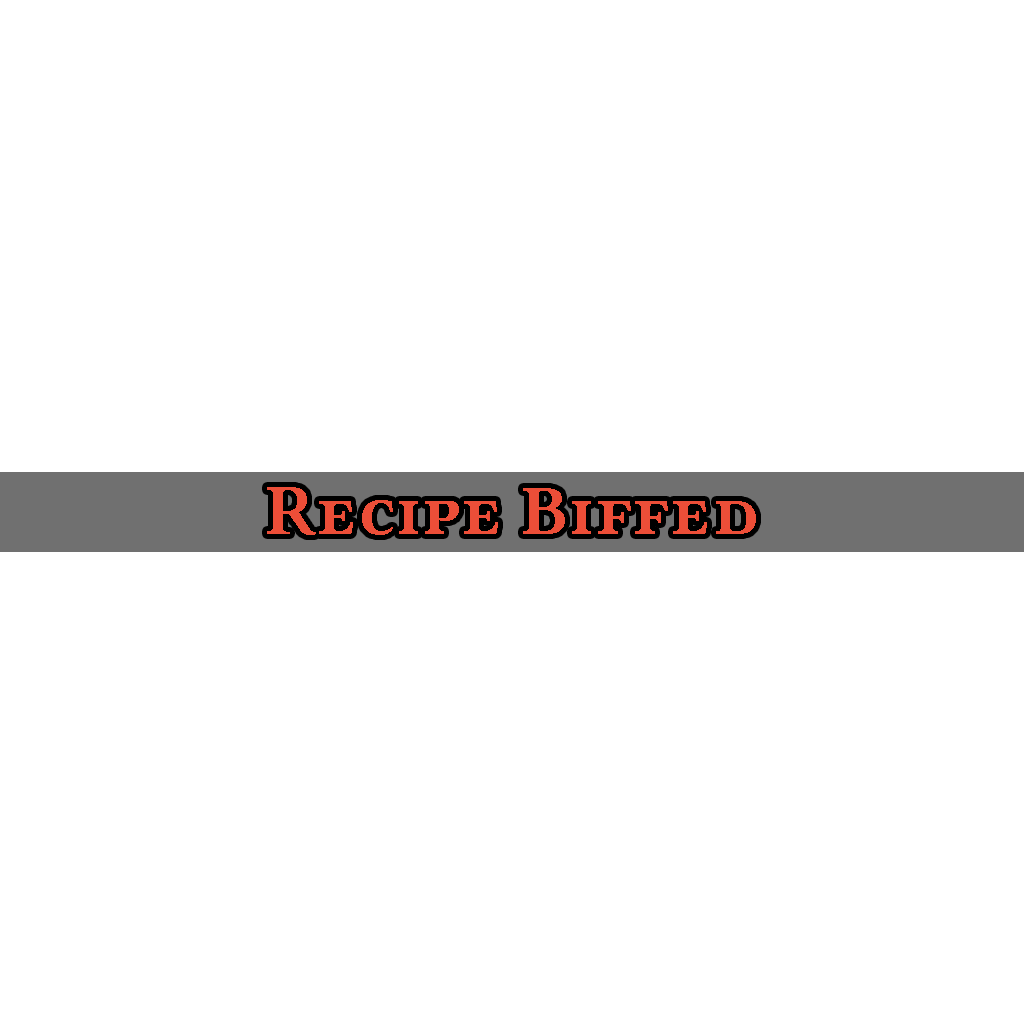
<style>
.page{position:relative;width:1024px;height:1024px;background:#ffffff}
.page>*{position:absolute;margin:0}
.t1{font:71.1px "LinLibertineB";color:#ec4e38;font-variant:small-caps}
</style>
<div class="page">
<p class="t1" style="left:267px;top:487px;width:489px;height:48px">Recipe Biffed</p>
</div>
